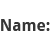
<style>
.page{position:relative;width:50px;height:50px;background:#ffffff}
.page>*{position:absolute;margin:0}
.t1{font:16px "DroidSans-Bold";color:#363636}
</style>
<div class="page">
<p class="t1" style="left:1px;top:19px;width:49px;height:12px">Name:</p>
</div>
